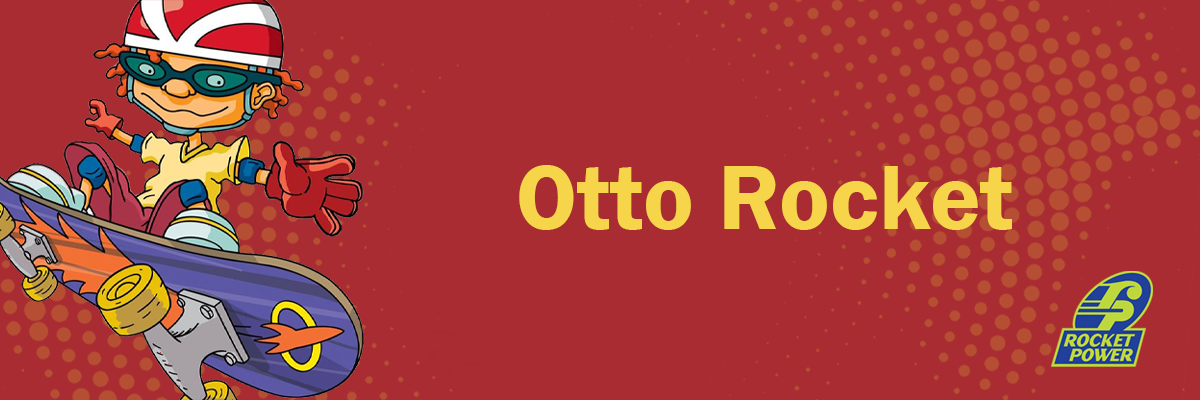
<style>
.page{position:relative;width:1200px;height:400px;background:#a82c32}
.page>*{position:absolute;margin:0}
.t1{font:95px "FranklinGothic-Demi";color:#f7d54b}
</style>
<div class="page">
<p class="t1" style="left:519px;top:165px;width:493px;height:65px">Otto Rocket</p>
</div>
